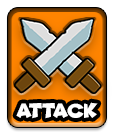
<style>
.page{position:relative;width:114px;height:136px;background:#ffffff}
.page>*{position:absolute;margin:0}
.t1{font:21.1px "Funhouse";color:#ffffff}
</style>
<div class="page">
<p class="t1" style="left:16px;top:102px;width:82px;height:17px">ATTACK</p>
</div>
